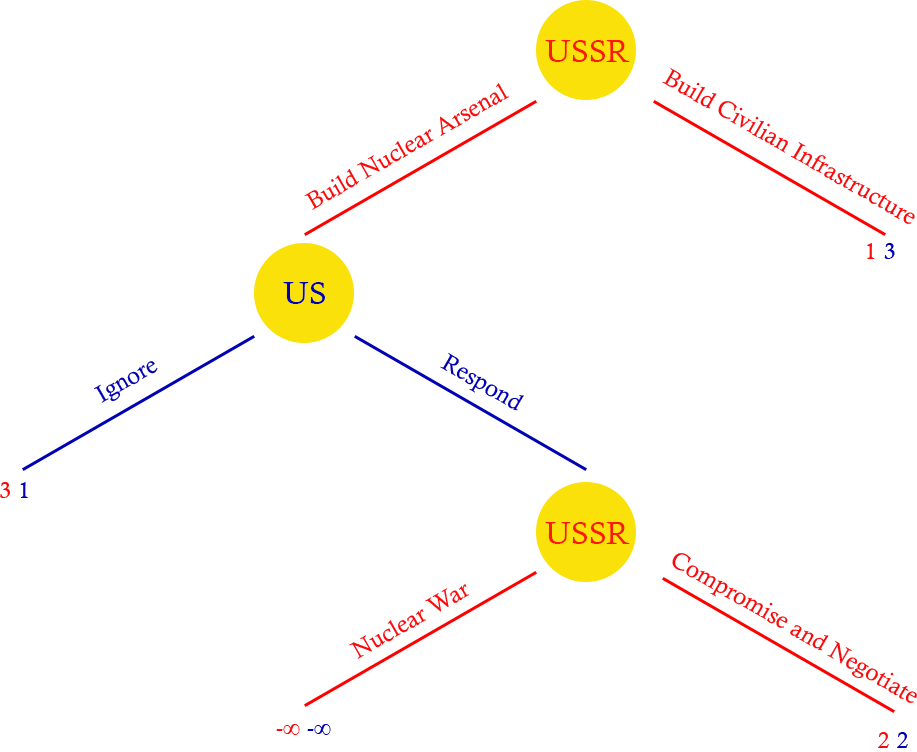
<style>
.page{position:relative;width:917px;height:752px;background:#ffffff}
.page>*{position:absolute;margin:0}
.t1{font:24px "CalistoMT";color:#f90909}
.t2{font:24px "CalistoMT";color:#ffffff}
.t3{font:24px "CalistoMT";color:#0101b4}
</style>
<div class="page">
<p class="t1" style="left:662px;top:68px;width:253px;height:156px;rotate:30deg">Build Civilian Infrastructure</p>
<p class="t1" style="left:304px;top:83px;width:205px;height:127px;rotate:-30deg">Build Nuclear Arsenal</p>
<p class="t1" style="left:867px;top:243px;width:28px;height:20px">1<span class="t2">,</span><span class="t3">3</span></p>
<p class="t3" style="left:440px;top:353px;width:84px;height:58px;rotate:30deg">Respond</p>
<p class="t3" style="left:94px;top:361px;width:64px;height:42px;rotate:-30deg">Ignore</p>
<p class="t1" style="left:0px;top:482px;width:28px;height:20px">3<span class="t2">,</span><span class="t3">1</span></p>
<p class="t1" style="left:672px;top:553px;width:245px;height:150px;rotate:30deg">Compromise and Negotiate</p>
<p class="t1" style="left:349px;top:584px;width:120px;height:75px;rotate:-30deg">Nuclear War</p>
<p class="t1" style="left:276px;top:724px;width:55px;height:16px">-∞<span class="t2">,</span><span class="t3">-∞</span></p>
<p class="t1" style="left:878px;top:732px;width:30px;height:20px">2<span class="t2">,</span><span class="t3">2</span></p>
</div>
